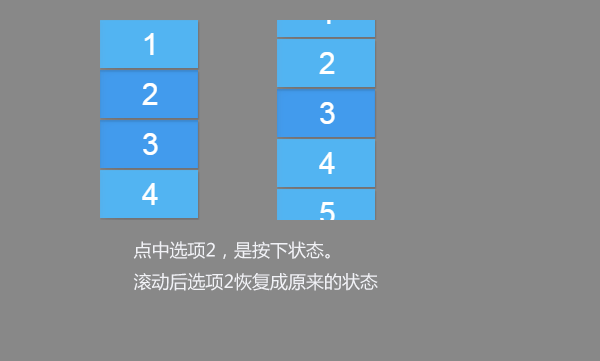
<style>
.page{position:relative;width:600px;height:361px;background:#888888}
.page>*{position:absolute;margin:0}
.t1{font:18px "MicrosoftYaHei";color:#f1f2f6}
</style>
<div class="page">
<p class="t1" style="left:133px;top:241px;width:245px;height:50px;text-align:justify">点中选项2，是按下状态。<br>滚动后选项2恢复成原来的状态</p>
</div>
